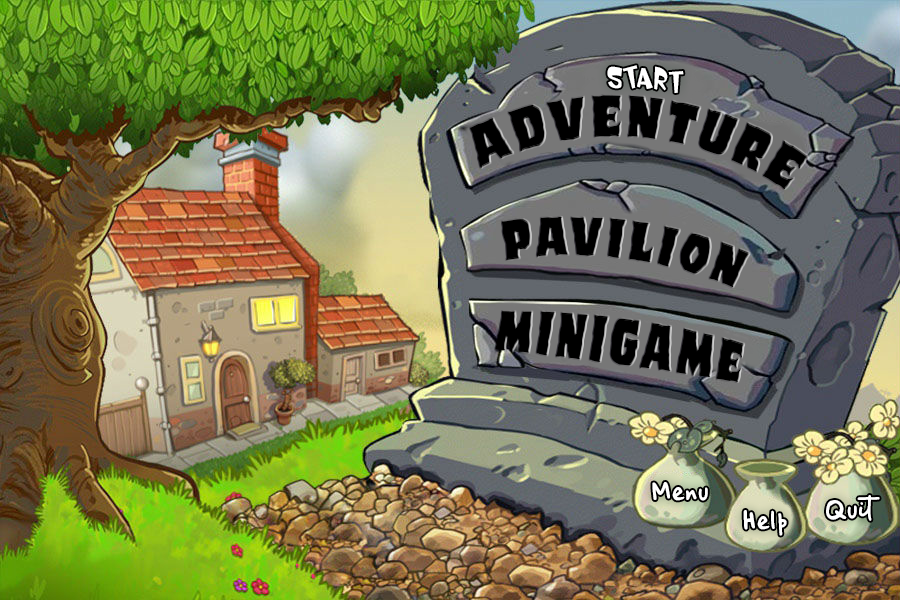
<style>
.page{position:relative;width:900px;height:600px}
.page>*{position:absolute;margin:0}
.t1{font:25px "SVN-Whimsy";letter-spacing:0.01em;color:#ffffff}
.t2{font:61.2px "DuskDemonStaggered";letter-spacing:0.1em;color:#000000}
.t3{font:57.5px "DuskDemonStaggered";letter-spacing:0.1em;color:#000000}
.t4{font:24.8px "iCielBeCool-Regular";letter-spacing:0.01em;color:#ffffff}
</style>
<div class="page">
<p class="t1" style="left:607px;top:65px;width:77px;height:28px">START</p>
<p class="t2" style="left:470px;top:95px;width:339px;height:94px;rotate:5deg">adventure</p>
<p class="t3" style="left:501px;top:216px;width:249px;height:72px;rotate:7deg">pavilion</p>
<p class="t3" style="left:495px;top:311px;width:250px;height:72px;rotate:8deg">minigame</p>
<p class="t4" style="left:652px;top:482px;width:56px;height:19px">Menu</p>
<p class="t4" style="left:826px;top:495px;width:54px;height:26px">Quit</p>
<p class="t4" style="left:743px;top:510px;width:44px;height:26px">Help</p>
</div>
